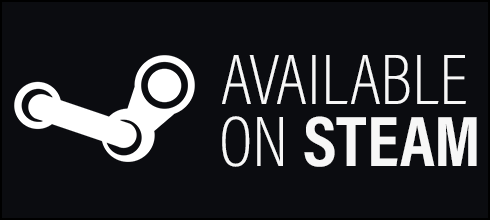
<style>
.page{position:relative;width:490px;height:220px;background:#0b0c10}
.page>*{position:absolute;margin:0}
.t1{font:72px "AcuminConcept-CondensedExtraLight";color:#f7f7f7}
.t2{font:72px "AcuminConcept-CondensedBold";color:#f7f7f7}
</style>
<div class="page">
<p class="t1" style="left:222px;top:55px;width:244px;height:49px">AVAILABLE</p>
<p class="t2" style="left:222px;top:116px;width:255px;height:51px"><span class="t1">ON </span>STEAM</p>
</div>
